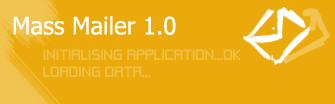
<style>
.page{position:relative;width:335px;height:104px;background:#eaaa0b}
.page>*{position:absolute;margin:0}
.t1{font:24px "Tahoma";color:#ffffff}
.t2{font:14px "ZeroThrees";color:#f0bf47}
</style>
<div class="page">
<p class="t1" style="left:13px;top:16px;width:163px;height:19px">Mass Mailer 1.0</p>
<p class="t2" style="left:43px;top:49px;width:198px;height:29px">INITIALISING APPLICATION...OK<br>LOADING DATA...</p>
</div>
